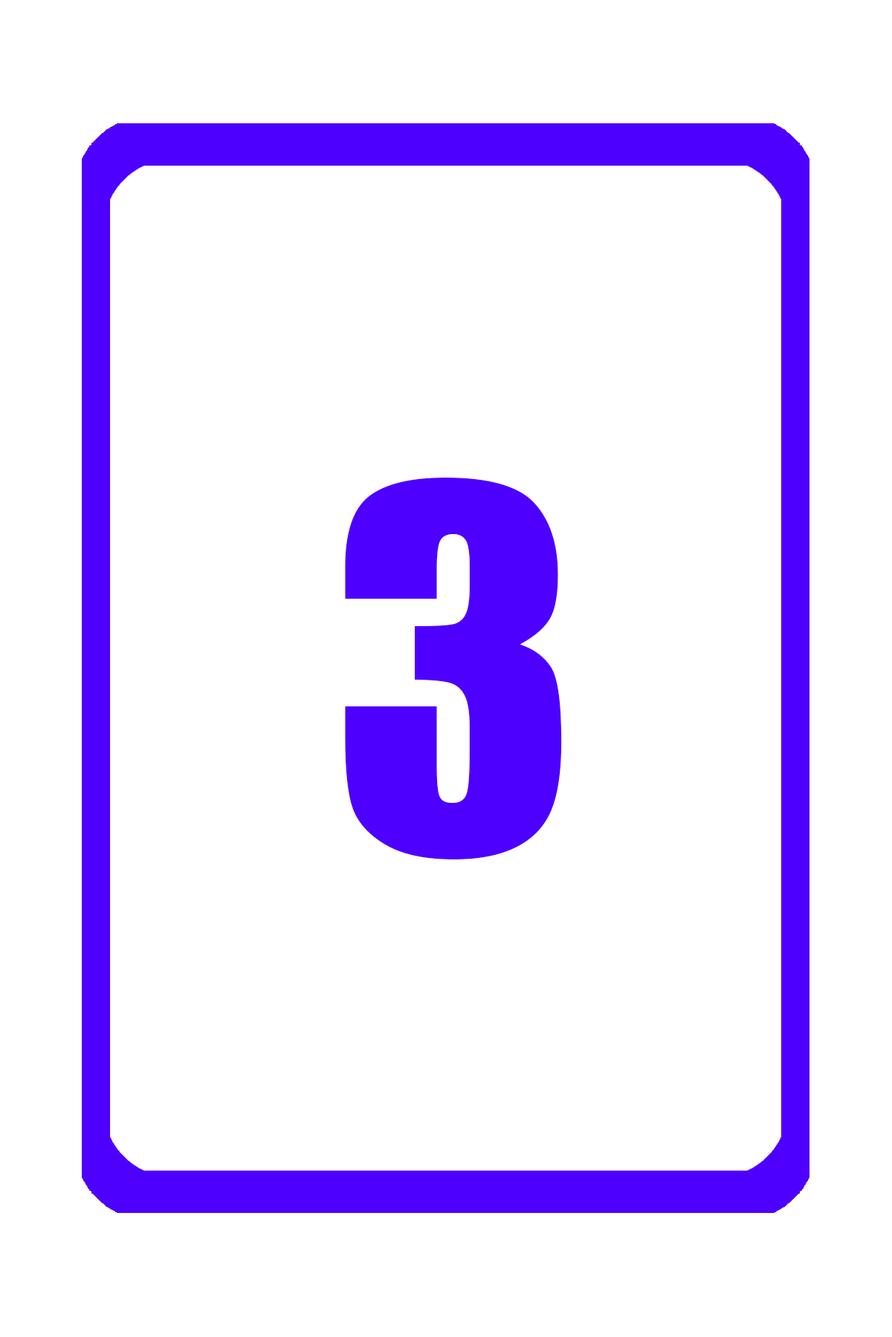
<style>
.page{position:relative;width:892px;height:1337px;background:#ffffff}
.page>*{position:absolute;margin:0}
.t1{font:464.4px "Impact";color:#4e00ff}
</style>
<div class="page">
<p class="t1" style="left:345px;top:478px;width:217px;height:382px">3</p>
</div>
